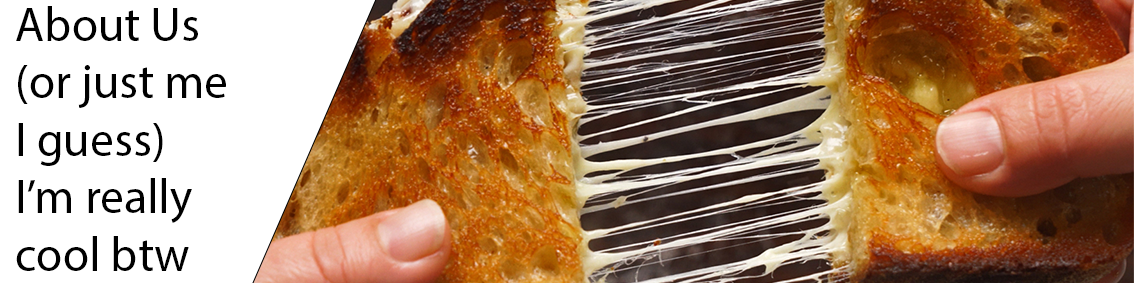
<style>
.page{position:relative;width:1134px;height:283px;background:#ffffff}
.page>*{position:absolute;margin:0}
.t1{font:48px "MyriadPro-Regular";color:#000000}
</style>
<div class="page">
<p class="t1" style="left:16px;top:6px;width:210px;height:265px">About Us<br>(or just me<br>I guess)<br>I’m really<br>cool btw</p>
</div>
